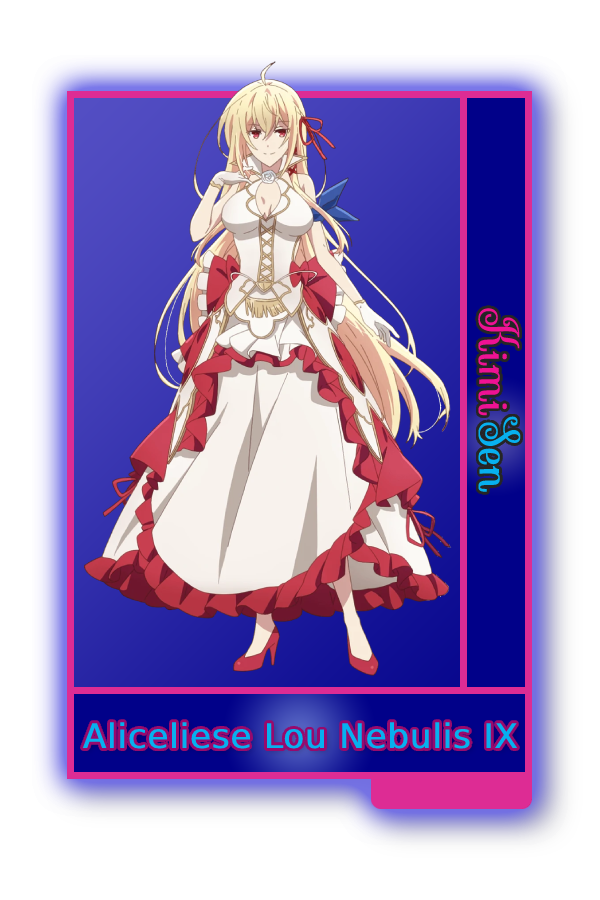
<style>
.page{position:relative;width:600px;height:900px;background:#ffffff}
.page>*{position:absolute;margin:0}
.t1{font:48.8px "Sevillana-Regular";color:#ee1294;font-weight:bold}
.t2{font:48.8px "Sevillana-Regular";color:#07b0ef;font-weight:bold}
.t3{font:34px "CoolveticaRg-Regular";color:#07b0ef;font-weight:bold}
</style>
<div class="page">
<p class="t1" style="left:478px;top:308px;width:43px;height:184px;rotate:90deg">Kimi<span class="t2">Sen</span></p>
<p class="t3" style="left:82px;top:722px;width:436px;height:27px">Aliceliese Lou Nebulis IX</p>
</div>
